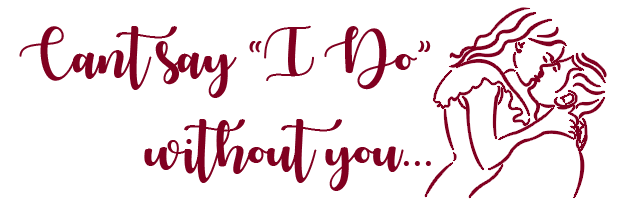
<style>
.page{position:relative;width:625px;height:208px;background:#ffffff}
.page>*{position:absolute;margin:0}
.t1{font:49.9px "AutumninNovember";color:#800020}
</style>
<div class="page">
<p class="t1" style="left:19px;top:25px;width:412px;height:73px">Cant say “I Do”</p>
<p class="t1" style="left:144px;top:119px;width:287px;height:72px">without you...</p>
</div>
